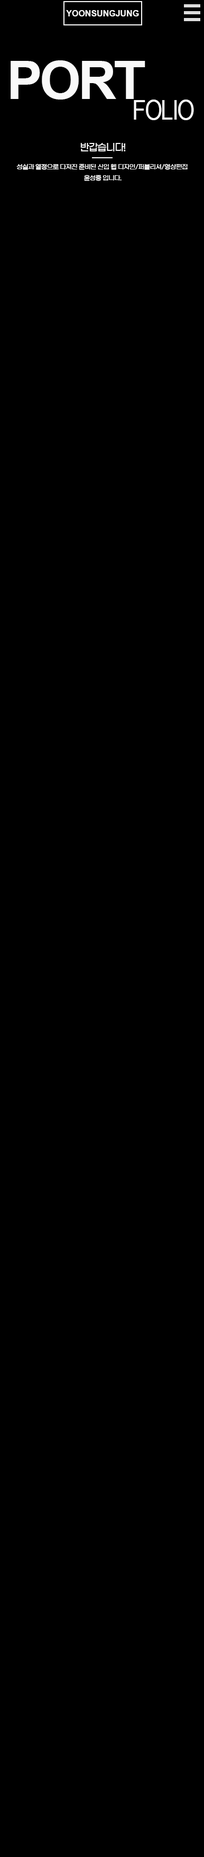
<style>
.page{position:relative;width:204px;height:1857px;background:#000000}
.page>*{position:absolute;margin:0}
.t1{font:8.5px "Arial-BoldMT";color:#f9f9f9}
.t2{font:52.9px "Arial-BoldMT";letter-spacing:-0.05em;color:#f9f9f9}
.t3{font:27.5px "ArialNarrow";letter-spacing:-0.05em;color:#f9f9f9}
.t4{font:9.5px "GmarketSansTTFMedium";letter-spacing:-0.05em;color:#f9f9f9}
.t5{font:6.4px "GmarketSansTTFMedium";letter-spacing:-0.05em;color:#f9f9f9}
</style>
<div class="page">
<p class="t1" style="left:66px;top:10px;width:73px;height:6px">YOONSUNGJUNG</p>
<p class="t2" style="left:11px;top:60px;width:135px;height:40px">PORT</p>
<p class="t3" style="left:134px;top:100px;width:60px;height:20px">FOLIO</p>
<p class="t4" style="left:80px;top:143px;width:46px;height:8px">반갑습니다!</p>
<p class="t5" style="left:16px;top:164px;width:172px;height:6px">성실과 열정으로 다져진 준비된 신입 웹 디자인/퍼블리셔/영상편집</p>
<p class="t5" style="left:84px;top:175px;width:38px;height:6px">윤성중 입니다.</p>
</div>
